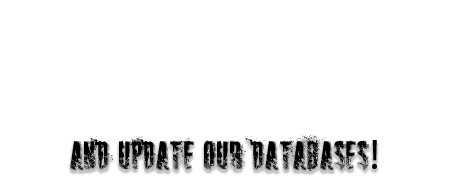
<style>
.page{position:relative;width:450px;height:180px;background:#ffffff}
.page>*{position:absolute;margin:0}
.t1{font:42px "SNIPER";color:#000000}
.t2{font:42px "MyriadPro-Regular";color:#000000}
</style>
<div class="page">
<p class="t1" style="left:70px;top:134px;width:307px;height:37px">and update our databases<span class="t2">!</span></p>
</div>
